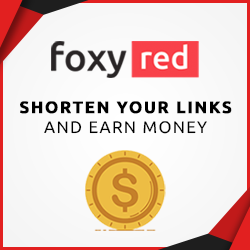
<style>
.page{position:relative;width:250px;height:250px}
.page>*{position:absolute;margin:0}
.t1{font:16.8px "Ubuntu-Bold";letter-spacing:0.075em;color:#000000;text-transform:uppercase;font-weight:bold}
.t2{font:16.8px "Ubuntu";letter-spacing:0.075em;color:#000000;text-transform:uppercase}
</style>
<div class="page">
<p class="t1" style="left:20px;top:101px;width:212px;height:33px;text-align:center">Shorten your links<br><span class="t2">And earn money</span></p>
</div>
